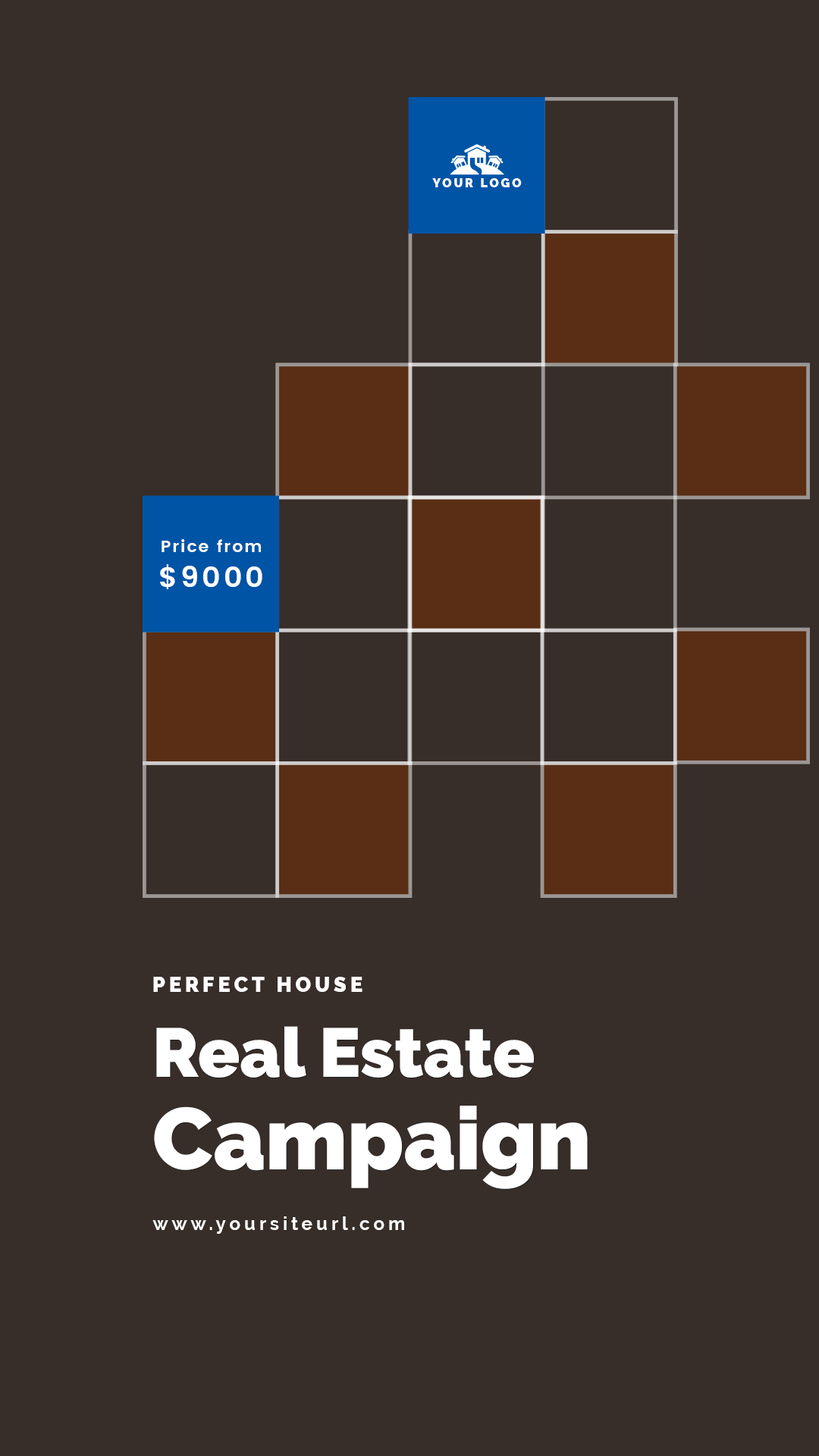
<style>
.page{position:relative;width:819px;height:1456px;background:#372d29}
.page>*{position:absolute;margin:0}
.t1{font:11.8px "Raleway-Black";letter-spacing:0.2em;color:#ffffff;text-transform:uppercase}
.t2{font:16.4px/34.5px "Poppins-SemiBold";letter-spacing:0.1em;color:#ffffff}
.t3{font:29.1px/34.5px "Poppins-SemiBold";letter-spacing:0.1em;color:#ffffff;text-transform:uppercase}
.t4{font:20.1px "Raleway-Black";letter-spacing:0.2em;color:#ffffff;text-transform:uppercase}
.t5{font:68.9px/91.8px "Raleway-Black";color:#ffffff}
.t6{font:87.2px/91.8px "Raleway-Black";color:#ffffff}
.t7{font:18.4px "Raleway-Bold";letter-spacing:0.2em;color:#ffffff}
</style>
<div class="page">
<p class="t1" style="left:432px;top:178px;width:90px;height:9px">your logo</p>
<p class="t2" style="left:160px;top:539px;width:102px;height:50px;text-align:center">Price from<br><span class="t3">$9000</span></p>
<p class="t4" style="left:153px;top:977px;width:209px;height:15px">perfect house</p>
<p class="t5" style="left:154px;top:1026px;width:434px;height:163px">Real Estate<br><span class="t6">Campaign</span></p>
<p class="t7" style="left:152px;top:1216px;width:252px;height:18px">www.yoursiteurl.com</p>
</div>
